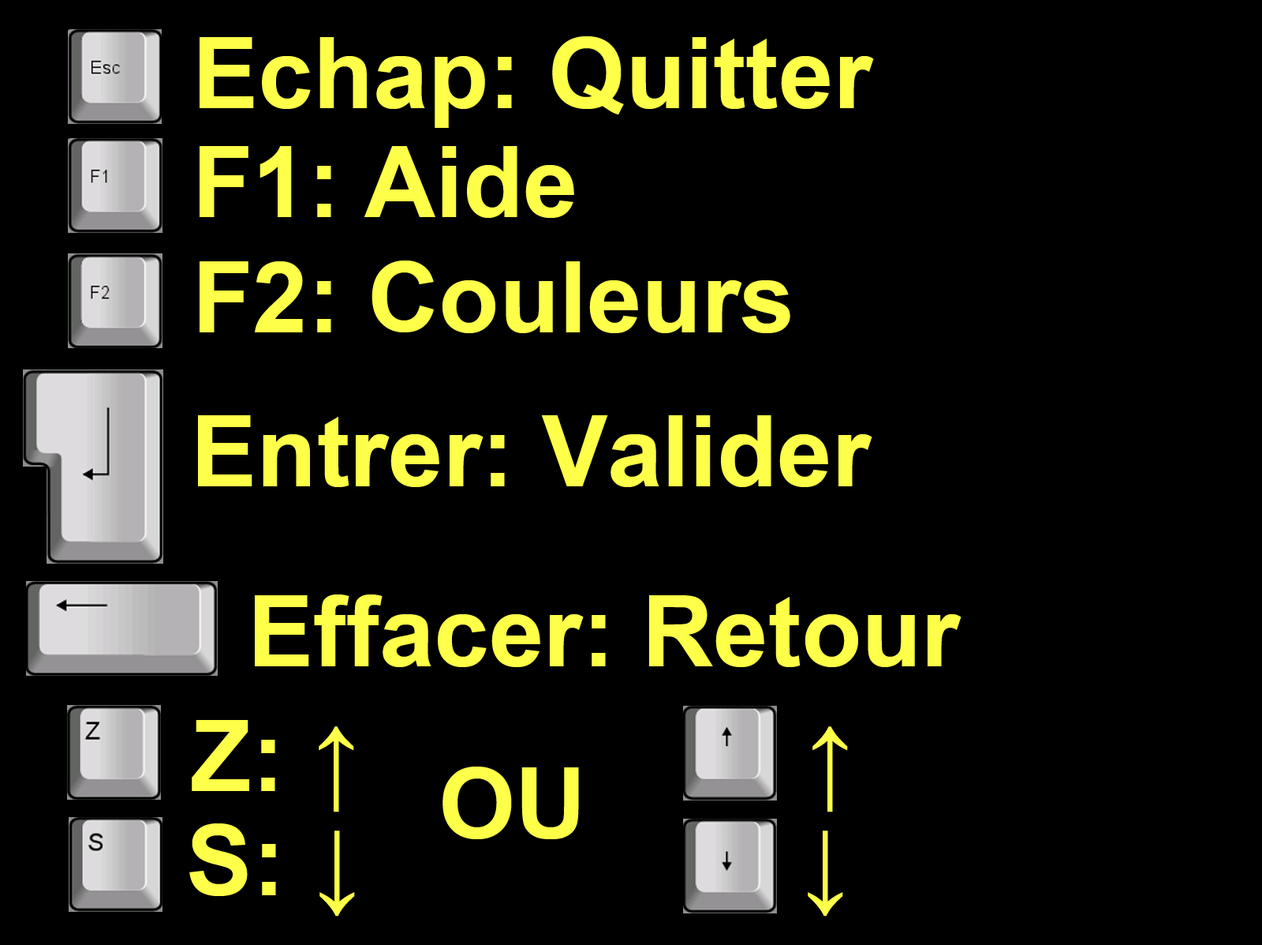
<style>
.page{position:relative;width:1262px;height:945px;background:#000000}
.page>*{position:absolute;margin:0}
.t1{font:98.6px "Arial-BoldMT";color:#fdff48}
</style>
<div class="page">
<p class="t1" style="left:200px;top:36px;width:674px;height:92px">Echap: Quitter</p>
<p class="t1" style="left:200px;top:146px;width:374px;height:72px">F1: Aide</p>
<p class="t1" style="left:200px;top:260px;width:591px;height:73px">F2: Couleurs</p>
<p class="t1" style="left:198px;top:415px;width:675px;height:72px">Entrer: Valider</p>
<p class="t1" style="left:255px;top:594px;width:707px;height:73px">Effacer: Retour</p>
<p class="t1" style="left:192px;top:720px;width:162px;height:92px">Z: ↑</p>
<p class="t1" style="left:813px;top:726px;width:35px;height:86px">↑</p>
<p class="t1" style="left:443px;top:766px;width:136px;height:73px">OU</p>
<p class="t1" style="left:189px;top:823px;width:166px;height:93px">S: ↓</p>
<p class="t1" style="left:808px;top:830px;width:36px;height:86px">↓</p>
</div>
